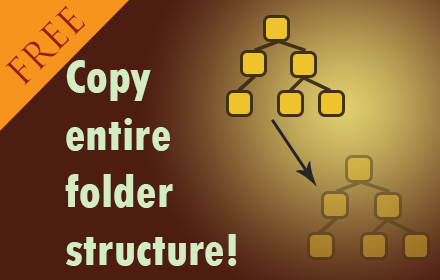
<style>
.page{position:relative;width:440px;height:280px}
.page>*{position:absolute;margin:0}
.t1{font:36px "TrajanPro-Regular";color:#971d1d}
.t2{font:48px "TwCenMT-CondensedExtraBold";color:#d3ecc1}
</style>
<div class="page">
<p class="t1" style="left:5px;top:5px;width:80px;height:81px;rotate:-45deg">FREE</p>
<p class="t2" style="left:65px;top:60px;width:172px;height:206px">Copy<br>entire<br>folder<br>structure!</p>
</div>
